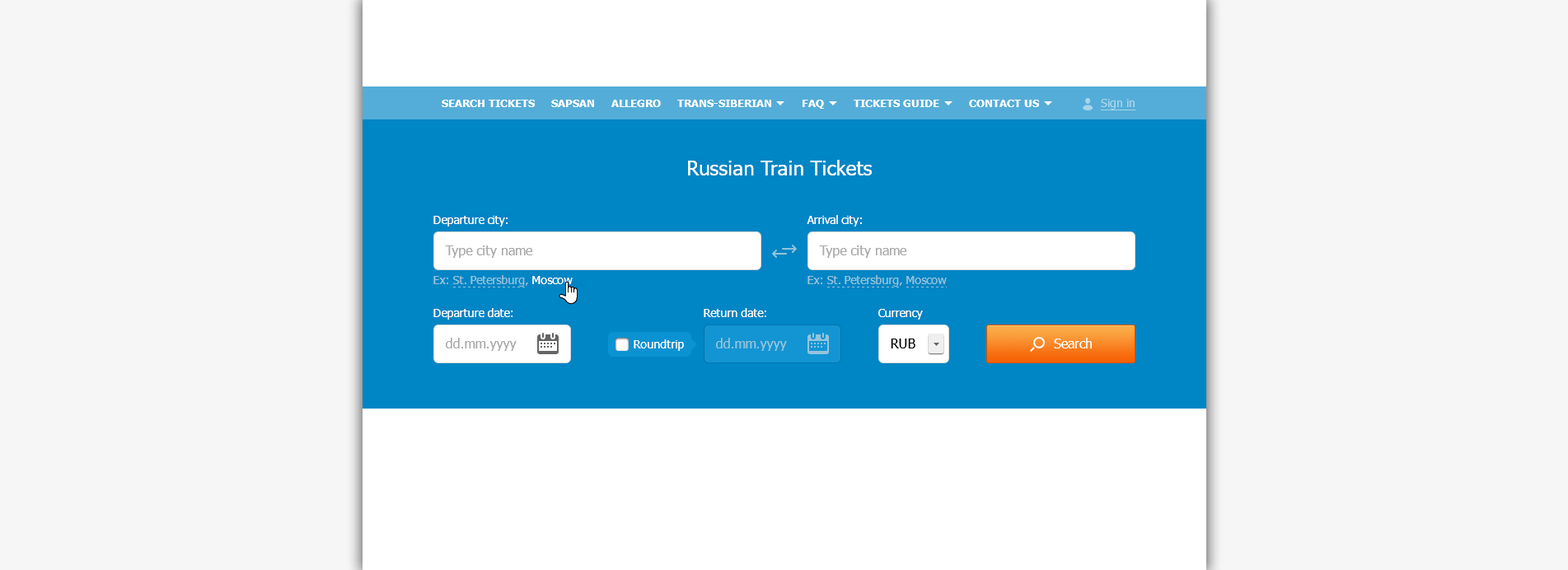
<style>
.page{position:relative;width:1568px;height:570px;background:#f6f6f6}
.page>*{position:absolute;margin:0}
.t1{font:10.7px "Tahoma-Bold";color:#ffffff}
.t2{font:11.5px "Tahoma";color:#a8d5eb;text-decoration:underline}
.t3{font:19.8px "Tahoma";color:#ffffff}
.t4{font:11.5px "Tahoma";color:#ffffff}
.t5{font:13.2px "Tahoma";color:#a9a9a9}
.t6{font:11.5px "Tahoma";color:#94c4db}
.t7{font:13.2px "Tahoma";color:#94c4db}
.t8{font:13.2px "Tahoma";color:#000000}
.t9{font:13.2px "Tahoma";color:#ffffff}
.t10{font:13.2px "Tahoma";color:#ffffff;text-transform:uppercase}
</style>
<div class="page">
<p class="t1" style="left:442px;top:100px;width:597px;height:9px">SEARCH TICKETS     SAPSAN     ALLEGRO     TRANS-SIBERIAN         FAQ         TICKETS GUIDE         CONTACT US</p>
<p class="t2" style="left:1101px;top:99px;width:35px;height:11px">Sign in</p>
<p class="t3" style="left:688px;top:160px;width:184px;height:16px">Russian Train Tickets</p>
<p class="t4" style="left:433px;top:216px;width:75px;height:11px">Departure city:</p>
<p class="t4" style="left:807px;top:215px;width:55px;height:12px">Arrival city:</p>
<p class="t5" style="left:445px;top:246px;width:87px;height:12px">Type city name</p>
<p class="t5" style="left:819px;top:246px;width:87px;height:12px">Type city name</p>
<p class="t6" style="left:433px;top:275px;width:140px;height:12px">Ex: St. Petersburg, <span class="t4">Moscow</span></p>
<p class="t6" style="left:807px;top:275px;width:140px;height:12px">Ex: St. Petersburg, Moscow</p>
<p class="t4" style="left:433px;top:308px;width:80px;height:12px">Departure date:</p>
<p class="t4" style="left:704px;top:308px;width:62px;height:9px">Return date:</p>
<p class="t4" style="left:878px;top:309px;width:45px;height:11px">Currency</p>
<p class="t5" style="left:446px;top:338px;width:71px;height:13px">dd.mm.yyyy</p>
<p class="t4" style="left:634px;top:339px;width:50px;height:12px">Roundtrip</p>
<p class="t7" style="left:716px;top:338px;width:71px;height:13px">dd.mm.yyyy</p>
<p class="t8" style="left:891px;top:339px;width:24px;height:10px">RUB</p>
<p class="t9" style="left:1054px;top:338px;width:38px;height:11px"><span class="t10">S</span>earch</p>
</div>
